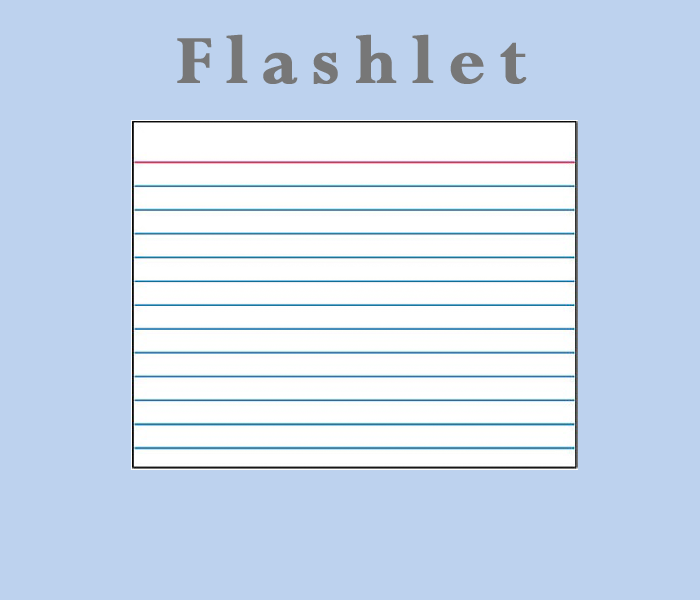
<style>
.page{position:relative;width:700px;height:600px;background:#bdd2ee}
.page>*{position:absolute;margin:0}
.t1{font:75px "Perpetua-Bold";letter-spacing:0.175em;color:#777777;font-weight:bold}
</style>
<div class="page">
<p class="t1" style="left:177px;top:34px;width:350px;height:50px">Flashlet</p>
</div>
